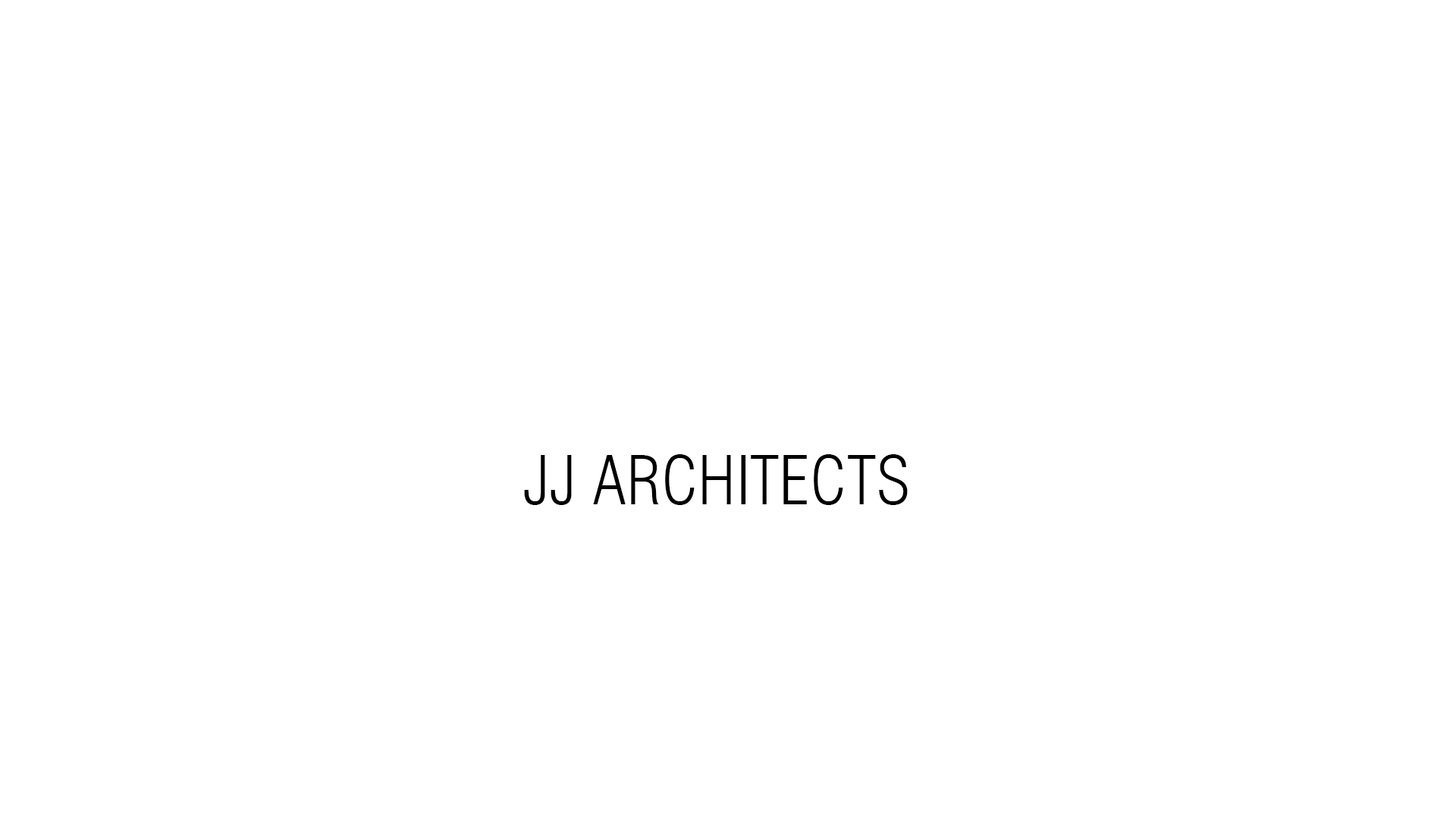
<style>
.page{position:relative;width:1456px;height:819px;background:#ffffff}
.page>*{position:absolute;margin:0}
.t1{font:65.9px "Swiss721BT-LightCondensed";color:#000000;scale:1.03 1}
</style>
<div class="page">
<p class="t1" style="left:524px;top:454px;width:384px;height:51px">JJ ARCHITECTS</p>
</div>
